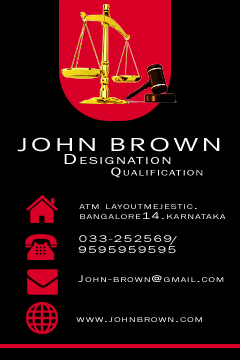
<style>
.page{position:relative;width:240px;height:360px;background:#000000}
.page>*{position:absolute;margin:0}
.t1{font:20px "Corbel";letter-spacing:0.1em;color:#ffffff;text-transform:uppercase;scale:1.45 1}
.t2{font:15px "FranklinGothic-Book";letter-spacing:0.1em;color:#ffffff;font-variant:small-caps;scale:1.45 1}
.t3{font:11.7px "FranklinGothic-Book";letter-spacing:0.1em;color:#ffffff;font-variant:small-caps;scale:1.45 1}
.t4{font:10px/10px "FranklinGothic-Book";letter-spacing:0.1em;color:#ffffff;font-variant:small-caps;scale:1.45 1}
.t5{font:10px "FranklinGothic-Book";letter-spacing:0.1em;color:#ffffff;font-variant:small-caps;scale:1.45 1}
.t6{font:10px "FranklinGothic-Book";letter-spacing:0.1em;font-variant:small-caps;scale:1.45 1}
</style>
<div class="page">
<p class="t1" style="left:17px;top:137px;width:203px;height:15px">JOHN BROWn</p>
<p class="t2" style="left:64px;top:154px;width:107px;height:10px">Designation</p>
<p class="t3" style="left:111px;top:167px;width:92px;height:11px">Qualification</p>
<p class="t4" style="left:79px;top:204px;width:147px;height:15px">atm layoutmejestic.<br>bangalore14.karnataka</p>
<p class="t5" style="left:78px;top:246px;width:98px;height:7px">9595959595</p>
<p class="t5" style="left:79px;top:235px;width:93px;height:7px">033-252569</p>
<p class="t6" style="left:170px;top:236px;width:7px;height:9px">/</p>
<p class="t5" style="left:78px;top:275px;width:146px;height:7px">John-brown@gmail.com</p>
<p class="t5" style="left:76px;top:317px;width:126px;height:5px">www.johnbrown.com</p>
</div>
